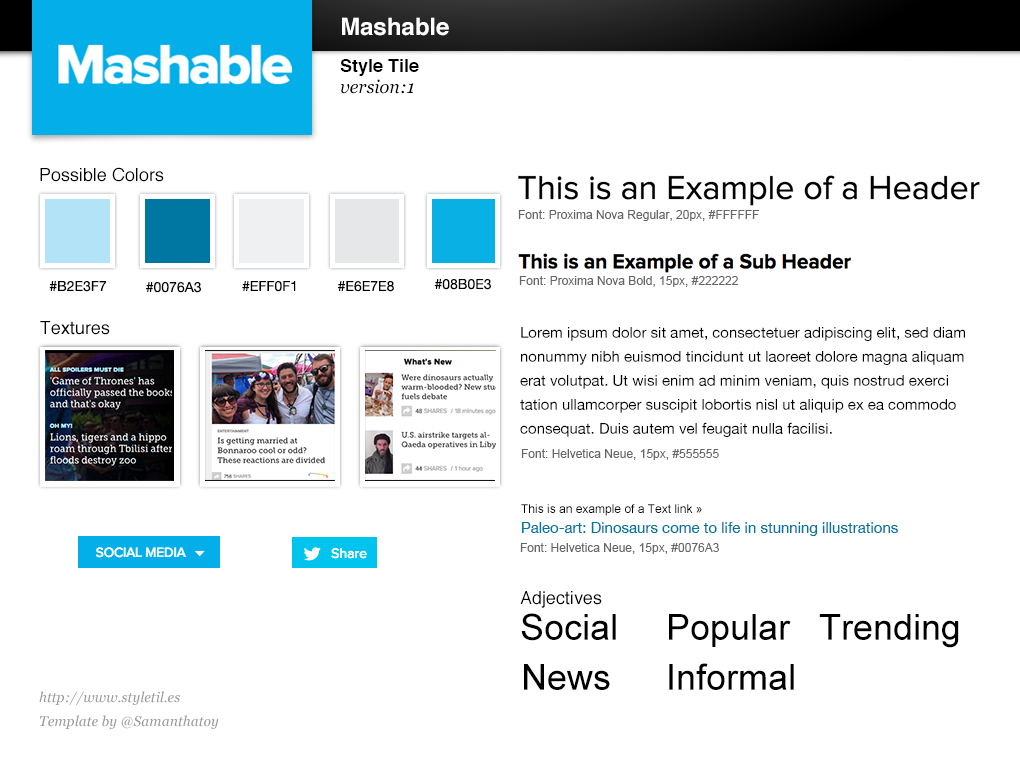
<style>
.page{position:relative;width:1020px;height:760px;background:#ffffff}
.page>*{position:absolute;margin:0}
.t1{font:24px "Helvetica-Bold";color:#ffffff}
.t2{font:18px "Helvetica-Bold";color:#000000}
.t3{font:18px "Georgia-Italic";color:#000000}
.t4{font:18px "Helvetica";color:#000000}
.t5{font:12px "ArialMT";color:#666666}
.t6{font:14px "HelveticaNeue";color:#000000}
.t7{font:15px/24px "HelveticaNeue";color:#000000}
.t8{font:12px "ArialMT";color:#000000}
.t9{font:15px "HelveticaNeue";color:#0076a3}
.t10{font:36px "ArialMT";color:#000000}
.t11{font:14px/24px "Georgia-Italic";color:#999999}
</style>
<div class="page">
<p class="t1" style="left:342px;top:17px;width:107px;height:19px">Mashable</p>
<p class="t2" style="left:340px;top:59px;width:79px;height:17px">Style Tile</p>
<p class="t3" style="left:340px;top:79px;width:74px;height:15px">version:1</p>
<p class="t4" style="left:40px;top:167px;width:124px;height:15px">Possible Colors</p>
<p class="t5" style="left:518px;top:210px;width:241px;height:11px">Font: Proxima Nova Regular, 20px, #FFFFFF</p>
<p class="t6" style="left:49px;top:281px;width:57px;height:11px">#B2E3F7</p>
<p class="t6" style="left:242px;top:281px;width:54px;height:11px">#EFF0F1</p>
<p class="t6" style="left:338px;top:281px;width:56px;height:11px">#E6E7E8</p>
<p class="t6" style="left:434px;top:279px;width:57px;height:11px">#08B0E3</p>
<p class="t5" style="left:519px;top:276px;width:219px;height:11px">Font: Proxima Nova Bold, 15px, #222222</p>
<p class="t6" style="left:146px;top:282px;width:55px;height:11px">#0076A3</p>
<p class="t4" style="left:40px;top:321px;width:70px;height:14px">Textures</p>
<p class="t7" style="left:520px;top:327px;width:445px;height:110px">Lorem ipsum dolor sit amet, consectetuer adipiscing elit, sed diam nonummy nibh euismod tincidunt ut laoreet dolore magna aliquam erat volutpat. Ut wisi enim ad minim veniam, quis nostrud exerci tation ullamcorper suscipit lobortis nisl ut aliquip ex ea commodo consequat. Duis autem vel feugait nulla facilisi.</p>
<p class="t5" style="left:521px;top:449px;width:198px;height:11px">Font: Helvetica Neue, 15px, #555555</p>
<p class="t8" style="left:521px;top:504px;width:181px;height:12px">This is an example of a Text link »</p>
<p class="t9" style="left:522px;top:522px;width:376px;height:14px">Paleo-art: Dinosaurs come to life in stunning illustrations</p>
<p class="t5" style="left:520px;top:543px;width:199px;height:11px">Font: Helvetica Neue, 15px, #0076A3</p>
<p class="t4" style="left:520px;top:591px;width:82px;height:17px">Adjectives</p>
<p class="t10" style="left:521px;top:613px;width:95px;height:28px">Social</p>
<p class="t10" style="left:669px;top:614px;width:122px;height:33px">Popular</p>
<p class="t10" style="left:819px;top:614px;width:140px;height:34px">Trending</p>
<p class="t10" style="left:524px;top:664px;width:86px;height:26px">News</p>
<p class="t10" style="left:669px;top:663px;width:125px;height:27px">Informal</p>
<p class="t11" style="left:39px;top:691px;width:180px;height:38px">http://www.styletil.es<br>Template by @Samanthatoy</p>
</div>
